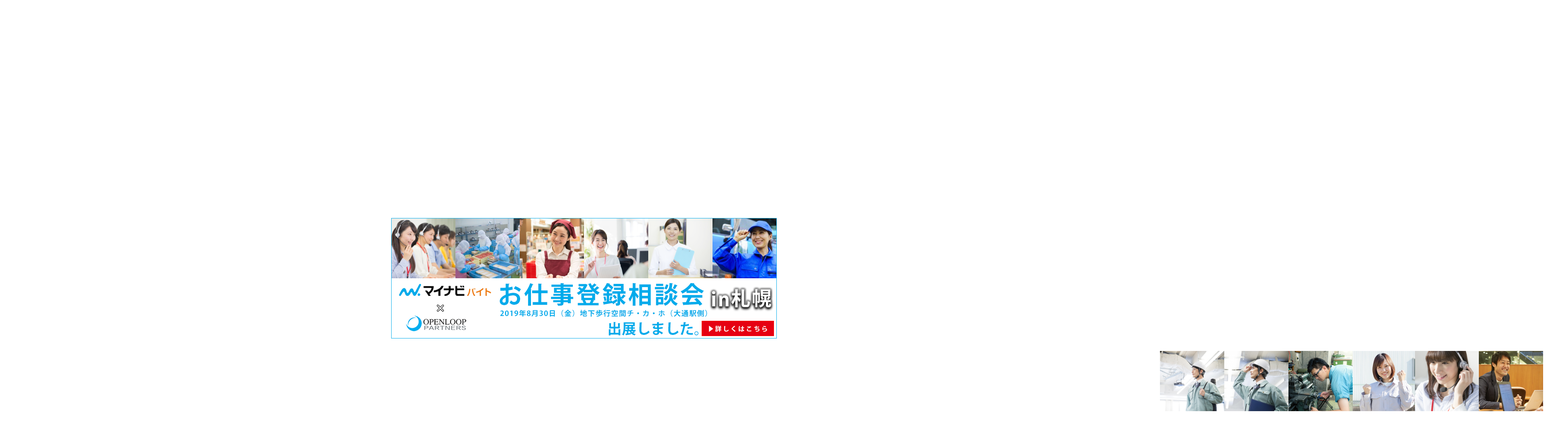
<style>
.page{position:relative;width:1568px;height:424px;background:#ffffff}
.page>*{position:absolute;margin:0}
.t1{font:24.1px "KozGoPr6N-Bold";letter-spacing:0.08em;color:#00abeb}
.t2{font:19.3px "KozGoPr6N-Bold";letter-spacing:0.08em;color:#ffffff}
.t3{font:9.6px "KozGoPr6N-Bold";letter-spacing:0.08em;color:#ffffff}
.t4{font:7.2px "KozGoPr6N-Bold";letter-spacing:0.08em;color:#00abeb}
.t5{font:14.5px "KozGoPr6N-Bold";color:#00abeb}
.t6{font:6.4px "KozGoPr6N-Bold";letter-spacing:0.2em;color:#feffff}
</style>
<div class="page">
<p class="t1" style="left:500px;top:283px;width:204px;height:23px">お仕事登録相談会</p>
<p class="t2" style="left:712px;top:291px;width:17px;height:15px">in</p>
<p class="t2" style="left:731px;top:289px;width:40px;height:19px">札幌</p>
<p class="t3" style="left:437px;top:305px;width:7px;height:7px">×</p>
<p class="t4" style="left:500px;top:310px;width:207px;height:7px">2019年8月30日（金）地下歩行空間チ・カ・ホ（大通駅側）</p>
<p class="t5" style="left:608px;top:322px;width:90px;height:14px">出展しました。</p>
<p class="t6" style="left:709px;top:326px;width:58px;height:6px">▶詳しくはこちら</p>
</div>
